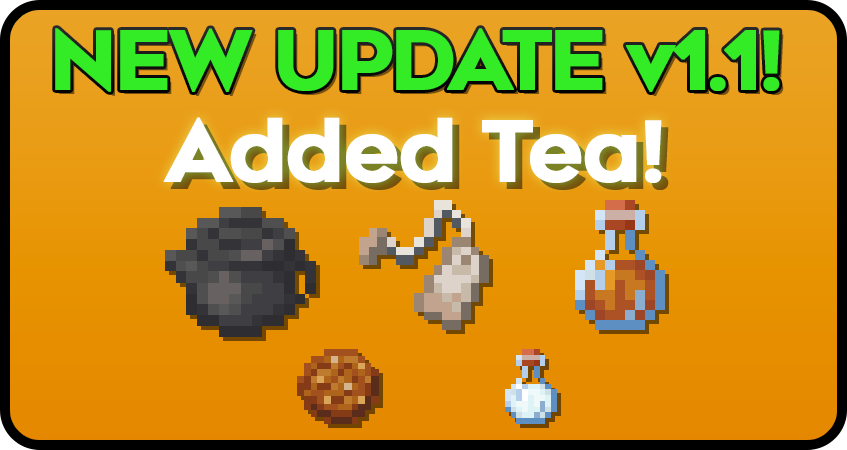
<style>
.page{position:relative;width:847px;height:450px}
.page>*{position:absolute;margin:0}
.t1{font:80.6px "Renogare-Regular";letter-spacing:-0.05em;color:#34ec26;font-weight:bold}
.t2{font:83.7px "Renogare-Regular";letter-spacing:-0.05em;color:#ffffff;font-weight:bold}
</style>
<div class="page">
<p class="t1" style="left:55px;top:28px;width:725px;height:64px">NEW UPDATE v1.1!</p>
<p class="t2" style="left:163px;top:117px;width:499px;height:66px">Added Tea!</p>
</div>
